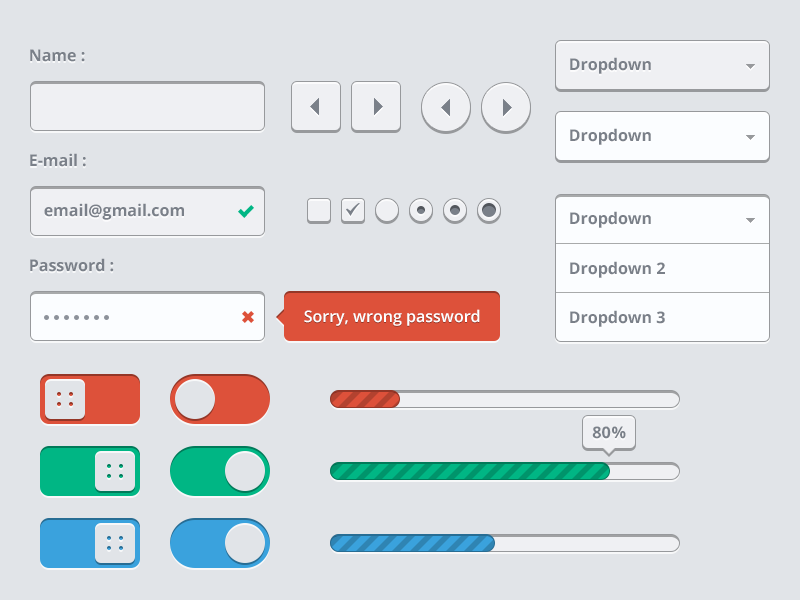
<style>
.page{position:relative;width:800px;height:600px;background:#e1e4e8}
.page>*{position:absolute;margin:0}
.t1{font:16px "OpenSans-Bold";color:#7a8089}
.t2{font:16px "OpenSans-Semibold";color:#ffffff}
</style>
<div class="page">
<p class="t1" style="left:30px;top:49px;width:55px;height:13px">Name :</p>
<p class="t1" style="left:570px;top:57px;width:81px;height:17px">Dropdown</p>
<p class="t1" style="left:570px;top:128px;width:81px;height:17px">Dropdown</p>
<p class="t1" style="left:30px;top:153px;width:56px;height:14px">E-mail :</p>
<p class="t1" style="left:44px;top:203px;width:140px;height:17px">email@gmail.com</p>
<p class="t1" style="left:570px;top:211px;width:81px;height:17px">Dropdown</p>
<p class="t1" style="left:30px;top:258px;width:84px;height:14px">Password :</p>
<p class="t1" style="left:570px;top:261px;width:95px;height:17px">Dropdown 2</p>
<p class="t2" style="left:304px;top:309px;width:176px;height:17px">Sorry, wrong password</p>
<p class="t1" style="left:570px;top:310px;width:95px;height:17px">Dropdown 3</p>
<p class="t1" style="left:592px;top:426px;width:34px;height:13px">80%</p>
</div>
